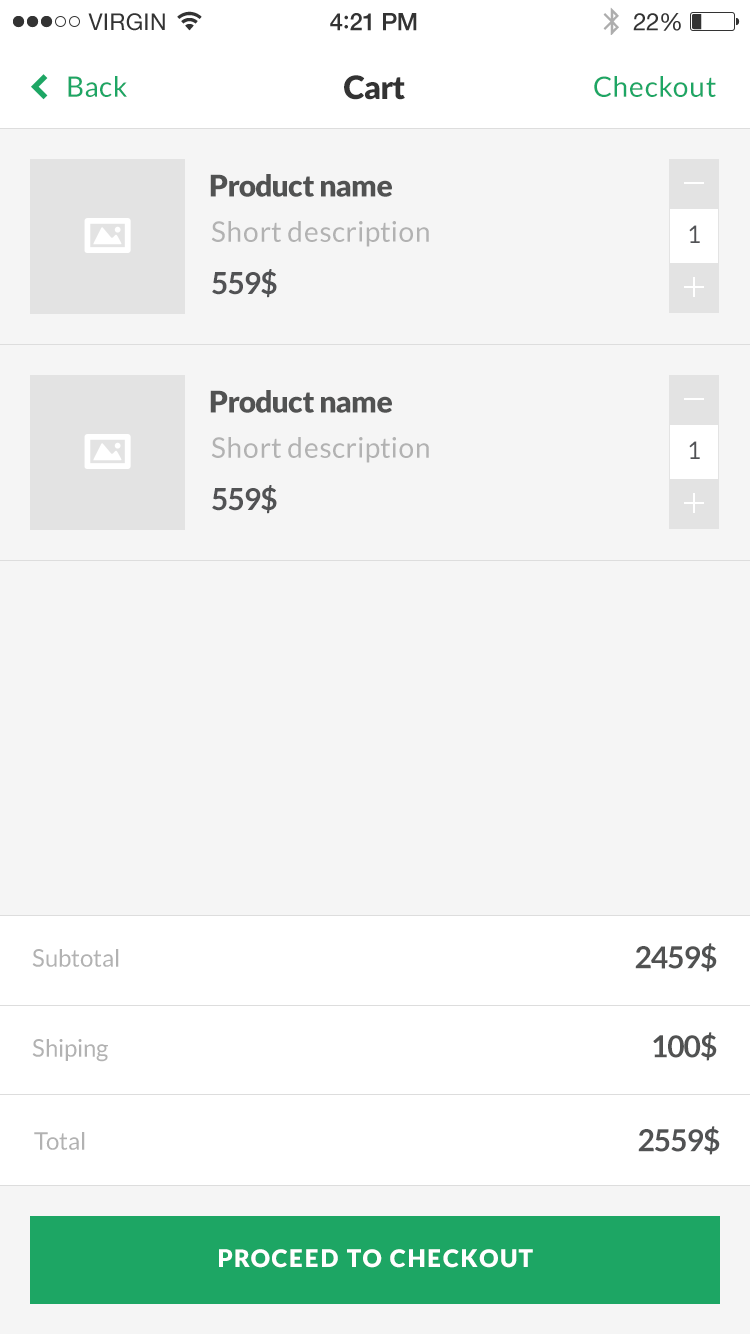
<style>
.page{position:relative;width:750px;height:1334px;background:#f5f5f5}
.page>*{position:absolute;margin:0}
.t1{font:28px "Lato-Regular";letter-spacing:0.02em;color:#1da664}
.t2{font:32px "Lato-Black";letter-spacing:-0.02em;color:#333333}
.t3{font:30px "Lato-Black";letter-spacing:-0.02em;color:#515252}
.t4{font:28px "Lato-Regular";letter-spacing:0.02em;color:#b2b2b2}
.t5{font:24px "Lato-Regular";letter-spacing:0.02em;color:#515255}
.t6{font:30px "Lato-Bold";letter-spacing:-0.02em;color:#515254}
.t7{font:24px "Lato-Regular";color:#b2b2b2}
.t8{font:30px "Lato-Bold";letter-spacing:-0.02em;color:#515252}
.t9{font:30px "Lato-Bold";letter-spacing:-0.02em;color:#515253}
.t10{font:24px "Lato-Black";letter-spacing:0.07em;color:#ffffff}
</style>
<div class="page">
<p class="t1" style="left:68px;top:76px;width:59px;height:21px">Back</p>
<p class="t2" style="left:344px;top:75px;width:61px;height:25px">Cart</p>
<p class="t1" style="left:594px;top:76px;width:122px;height:21px">Checkout</p>
<p class="t3" style="left:210px;top:174px;width:182px;height:23px">Product name</p>
<p class="t4" style="left:211px;top:221px;width:218px;height:26px">Short description</p>
<p class="t5" style="left:689px;top:225px;width:11px;height:18px">1</p>
<p class="t6" style="left:212px;top:269px;width:65px;height:29px">559$</p>
<p class="t3" style="left:210px;top:390px;width:182px;height:23px">Product name</p>
<p class="t4" style="left:211px;top:437px;width:218px;height:26px">Short description</p>
<p class="t5" style="left:689px;top:441px;width:11px;height:18px">1</p>
<p class="t6" style="left:212px;top:485px;width:65px;height:29px">559$</p>
<p class="t7" style="left:32px;top:949px;width:87px;height:18px">Subtotal</p>
<p class="t8" style="left:635px;top:943px;width:82px;height:29px">2459$</p>
<p class="t8" style="left:653px;top:1032px;width:64px;height:29px">100$</p>
<p class="t7" style="left:32px;top:1039px;width:76px;height:23px">Shiping</p>
<p class="t7" style="left:34px;top:1132px;width:51px;height:18px">Total</p>
<p class="t9" style="left:638px;top:1126px;width:82px;height:29px">2559$</p>
<p class="t10" style="left:219px;top:1249px;width:314px;height:19px">PROCEED TO CHECKOUT</p>
</div>
